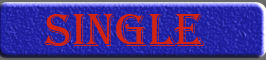
<style>
.page{position:relative;width:266px;height:60px}
.page>*{position:absolute;margin:0}
.t1{font:48px "Algerian";color:#d12311}
</style>
<div class="page">
<p class="t1" style="left:44px;top:14px;width:161px;height:32px">Single</p>
</div>
